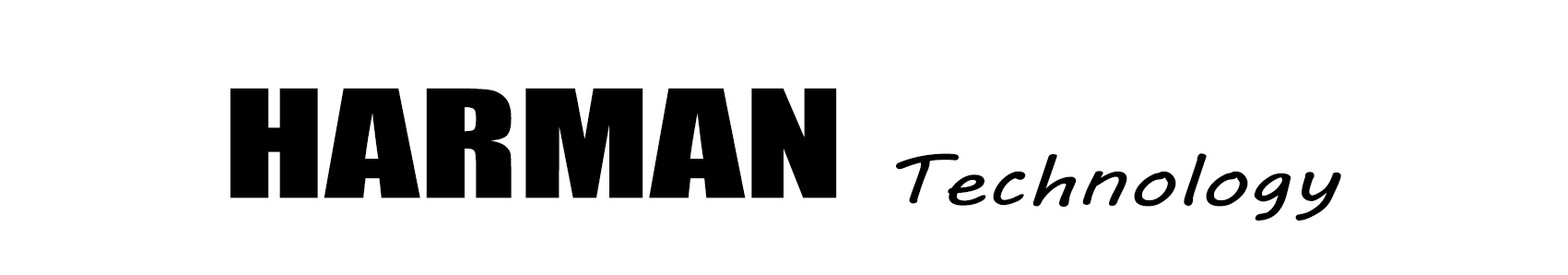
<style>
.page{position:relative;width:1568px;height:275px;background:#ffffff}
.page>*{position:absolute;margin:0}
.t1{font:138.3px "Impact";color:#000000;scale:1.33 1}
.t2{font:69.1px "MVBoli";color:#000000;scale:1.33 1}
</style>
<div class="page">
<p class="t1" style="left:230px;top:88px;width:607px;height:110px">HARMAN</p>
<p class="t2" style="left:896px;top:153px;width:445px;height:67px">Technology</p>
</div>
